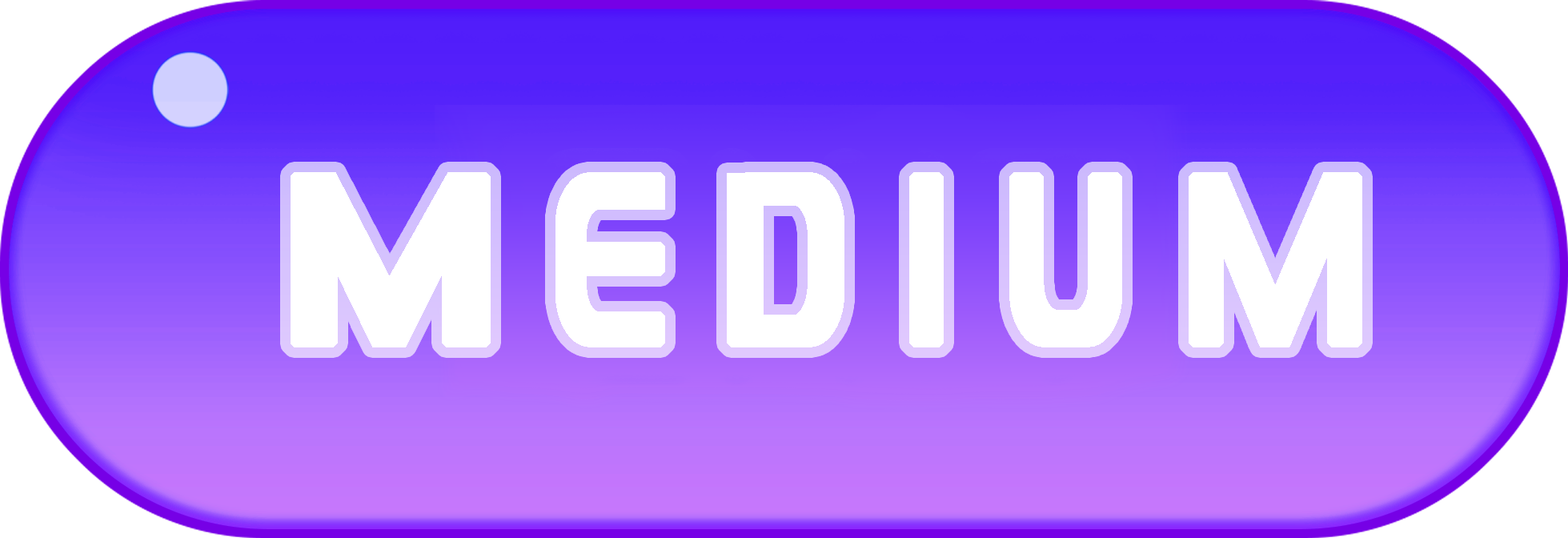
<style>
.page{position:relative;width:1568px;height:538px}
.page>*{position:absolute;margin:0}
.t1{font:207.2px "GAMECUBENDualSet";letter-spacing:0.2em;color:#ffffff;font-weight:bold;scale:0.85 1}
</style>
<div class="page">
<p class="t1" style="left:291px;top:172px;width:1071px;height:175px">Medium</p>
</div>
